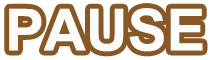
<style>
.page{position:relative;width:210px;height:60px;background:#875826}
.page>*{position:absolute;margin:0}
.t1{font:58px "Arial-BoldMT";color:#ffffff}
</style>
<div class="page">
<p class="t1" style="left:9px;top:8px;width:194px;height:44px">PAUSE</p>
</div>
